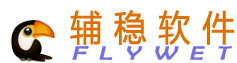
<style>
.page{position:relative;width:237px;height:63px;background:#ffffff}
.page>*{position:absolute;margin:0}
.t1{font:35.2px "MicrosoftYaHei";letter-spacing:0.35em;color:#df6f03;font-weight:bold;scale:0.91 1}
.t2{font:19.2px "BerlinSansFB-Reg";letter-spacing:0.45em;color:#726fe9;font-weight:bold;font-style:italic;scale:1.38 1}
</style>
<div class="page">
<p class="t1" style="left:70px;top:10px;width:165px;height:35px">辅稳软件</p>
<p class="t2" style="left:72px;top:46px;width:160px;height:14px">FLYWET</p>
</div>
